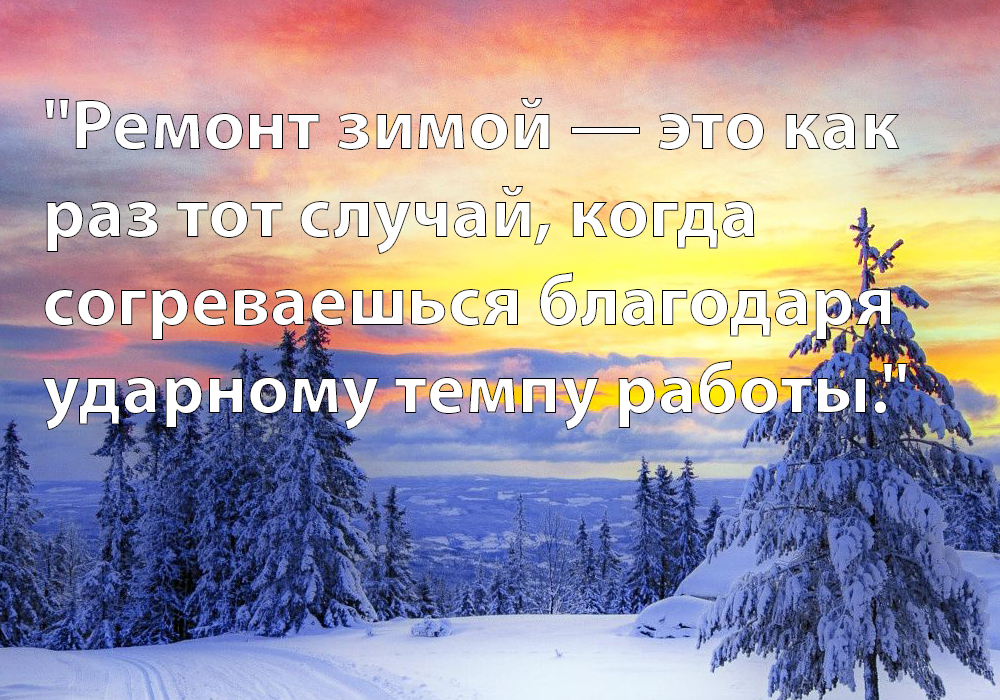
<style>
.page{position:relative;width:1000px;height:700px}
.page>*{position:absolute;margin:0}
.t1{font:73.3px "MyriadPro-Bold";color:#ffffff}
</style>
<div class="page">
<p class="t1" style="left:42px;top:98px;width:865px;height:332px">"Ремонт зимой — это как раз тот случай, когда согреваешься благодаря ударному темпу работы."</p>
</div>
